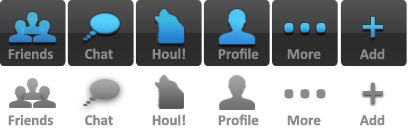
<style>
.page{position:relative;width:409px;height:129px;background:#ffffff}
.page>*{position:absolute;margin:0}
.t1{font:42.9px "SegoeUI-SemiBold";color:#44b8eb}
.t2{font:60px "Calibri-Bold"}
.t3{font:15px "Calibri-Bold";color:#8a8a8a}
.t4{font:60px "Calibri-Bold";color:#8a8a8a}
.t5{font:42.9px "SegoeUI-SemiBold";color:#848484}
</style>
<div class="page">
<p class="t1" style="left:362px;top:16px;width:21px;height:21px">+</p>
<p class="t2" style="left:284px;top:23px;width:42px;height:10px">...</p>
<p class="t3" style="left:8px;top:48px;width:45px;height:11px">Friends</p>
<p class="t3" style="left:85px;top:48px;width:28px;height:11px">Chat</p>
<p class="t3" style="left:152px;top:48px;width:33px;height:11px">Houl!</p>
<p class="t3" style="left:218px;top:48px;width:41px;height:11px">Profile</p>
<p class="t3" style="left:287px;top:49px;width:34px;height:10px">More</p>
<p class="t3" style="left:360px;top:48px;width:25px;height:12px">Add</p>
<p class="t4" style="left:284px;top:89px;width:42px;height:10px">...</p>
<p class="t5" style="left:362px;top:82px;width:21px;height:21px">+</p>
<p class="t3" style="left:8px;top:114px;width:45px;height:12px">Friends</p>
<p class="t3" style="left:85px;top:114px;width:28px;height:12px">Chat</p>
<p class="t3" style="left:152px;top:114px;width:33px;height:12px">Houl!</p>
<p class="t3" style="left:218px;top:114px;width:41px;height:12px">Profile</p>
<p class="t3" style="left:287px;top:115px;width:34px;height:11px">More</p>
<p class="t3" style="left:360px;top:114px;width:25px;height:12px">Add</p>
</div>
